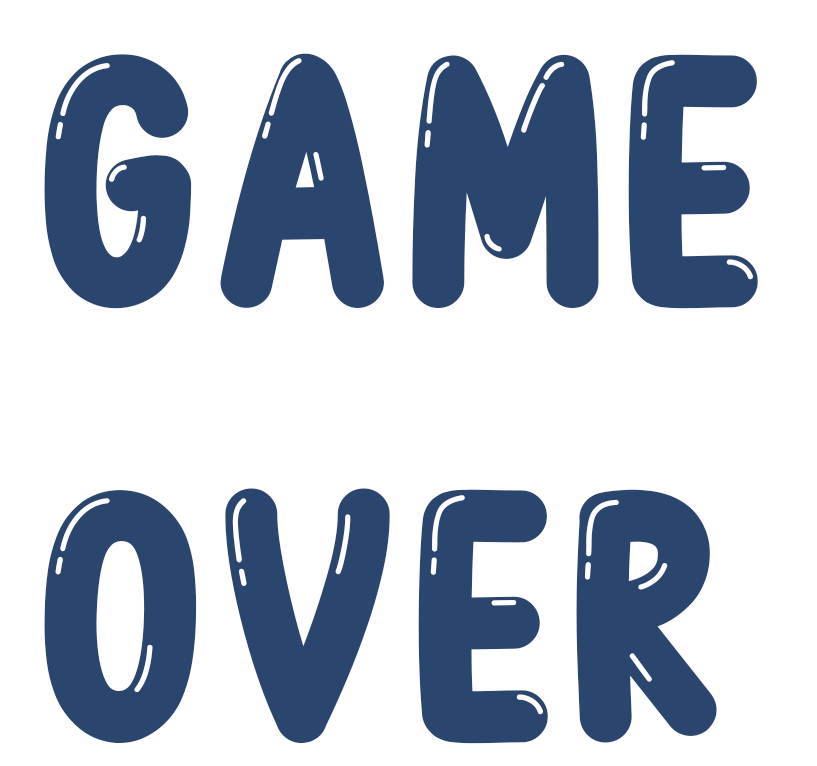
<style>
.page{position:relative;width:817px;height:766px;background:#ffffff}
.page>*{position:absolute;margin:0}
.t1{font:362.5px "BubbleBobble";color:#2a456e}
</style>
<div class="page">
<p class="t1" style="left:44px;top:53px;width:714px;height:691px">GAME<br>OVER</p>
</div>
